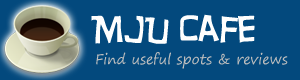
<style>
.page{position:relative;width:300px;height:80px;background:#03497d}
.page>*{position:absolute;margin:0}
.t1{font:36px "HurryUp";color:#fefefe}
.t2{font:14px "SegoePrint";color:#bebebe}
</style>
<div class="page">
<p class="t1" style="left:91px;top:14px;width:164px;height:30px">MJU Cafe</p>
<p class="t2" style="left:96px;top:52px;width:192px;height:17px">Find useful spots &amp; reviews</p>
</div>
